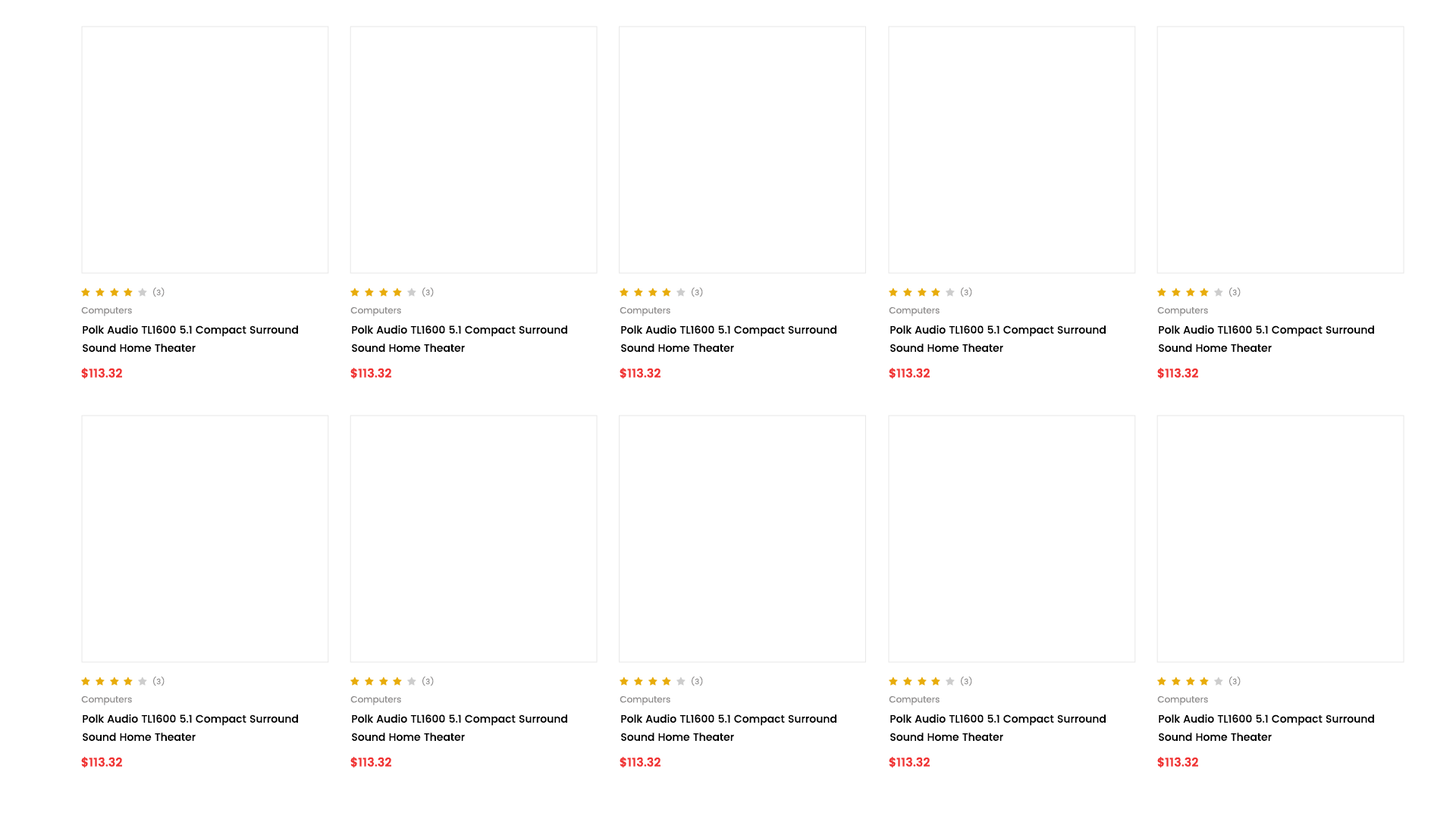
<style>
.page{position:relative;width:1456px;height:819px;background:#ffffff}
.page>*{position:absolute;margin:0}
.t1{font:7.6px "Poppins-Regular";color:#8e8c8c}
.t2{font:9.1px "Poppins-Regular";color:#8e8c8c}
.t3{font:10.6px/18.2px "Poppins-Medium";color:#000000}
.t4{font:12.1px "Poppins-SemiBold";color:#f03333}
</style>
<div class="page">
<p class="t1" style="left:153px;top:287px;width:12px;height:10px">(3)</p>
<p class="t1" style="left:422px;top:287px;width:12px;height:10px">(3)</p>
<p class="t1" style="left:692px;top:287px;width:11px;height:10px">(3)</p>
<p class="t1" style="left:961px;top:287px;width:11px;height:10px">(3)</p>
<p class="t1" style="left:1229px;top:287px;width:12px;height:10px">(3)</p>
<p class="t2" style="left:81px;top:307px;width:51px;height:9px">Computers</p>
<p class="t2" style="left:350px;top:307px;width:51px;height:9px">Computers</p>
<p class="t2" style="left:620px;top:307px;width:50px;height:9px">Computers</p>
<p class="t2" style="left:889px;top:307px;width:51px;height:9px">Computers</p>
<p class="t2" style="left:1157px;top:307px;width:51px;height:9px">Computers</p>
<p class="t3" style="left:83px;top:325px;width:215px;height:27px">Polk Audio TL1600 5.1 Compact Surround Sound Home Theater</p>
<p class="t3" style="left:352px;top:325px;width:215px;height:27px">Polk Audio TL1600 5.1 Compact Surround Sound Home Theater</p>
<p class="t3" style="left:621px;top:325px;width:215px;height:27px">Polk Audio TL1600 5.1 Compact Surround Sound Home Theater</p>
<p class="t3" style="left:890px;top:325px;width:216px;height:27px">Polk Audio TL1600 5.1 Compact Surround Sound Home Theater</p>
<p class="t3" style="left:1159px;top:325px;width:215px;height:27px">Polk Audio TL1600 5.1 Compact Surround Sound Home Theater</p>
<p class="t4" style="left:81px;top:368px;width:41px;height:11px">$113.32</p>
<p class="t4" style="left:350px;top:368px;width:41px;height:11px">$113.32</p>
<p class="t4" style="left:620px;top:368px;width:40px;height:11px">$113.32</p>
<p class="t4" style="left:889px;top:368px;width:41px;height:11px">$113.32</p>
<p class="t4" style="left:1157px;top:368px;width:41px;height:11px">$113.32</p>
<p class="t1" style="left:153px;top:676px;width:12px;height:10px">(3)</p>
<p class="t1" style="left:422px;top:676px;width:12px;height:10px">(3)</p>
<p class="t1" style="left:692px;top:676px;width:11px;height:10px">(3)</p>
<p class="t1" style="left:961px;top:676px;width:11px;height:10px">(3)</p>
<p class="t1" style="left:1229px;top:676px;width:12px;height:10px">(3)</p>
<p class="t2" style="left:81px;top:696px;width:51px;height:9px">Computers</p>
<p class="t2" style="left:350px;top:696px;width:51px;height:9px">Computers</p>
<p class="t2" style="left:620px;top:696px;width:50px;height:9px">Computers</p>
<p class="t2" style="left:889px;top:696px;width:51px;height:9px">Computers</p>
<p class="t2" style="left:1157px;top:696px;width:51px;height:9px">Computers</p>
<p class="t3" style="left:83px;top:714px;width:215px;height:27px">Polk Audio TL1600 5.1 Compact Surround Sound Home Theater</p>
<p class="t3" style="left:352px;top:714px;width:215px;height:27px">Polk Audio TL1600 5.1 Compact Surround Sound Home Theater</p>
<p class="t3" style="left:621px;top:714px;width:215px;height:27px">Polk Audio TL1600 5.1 Compact Surround Sound Home Theater</p>
<p class="t3" style="left:890px;top:714px;width:216px;height:27px">Polk Audio TL1600 5.1 Compact Surround Sound Home Theater</p>
<p class="t3" style="left:1159px;top:714px;width:215px;height:27px">Polk Audio TL1600 5.1 Compact Surround Sound Home Theater</p>
<p class="t4" style="left:81px;top:757px;width:41px;height:11px">$113.32</p>
<p class="t4" style="left:350px;top:757px;width:41px;height:11px">$113.32</p>
<p class="t4" style="left:620px;top:757px;width:40px;height:11px">$113.32</p>
<p class="t4" style="left:889px;top:757px;width:41px;height:11px">$113.32</p>
<p class="t4" style="left:1157px;top:757px;width:41px;height:11px">$113.32</p>
</div>
